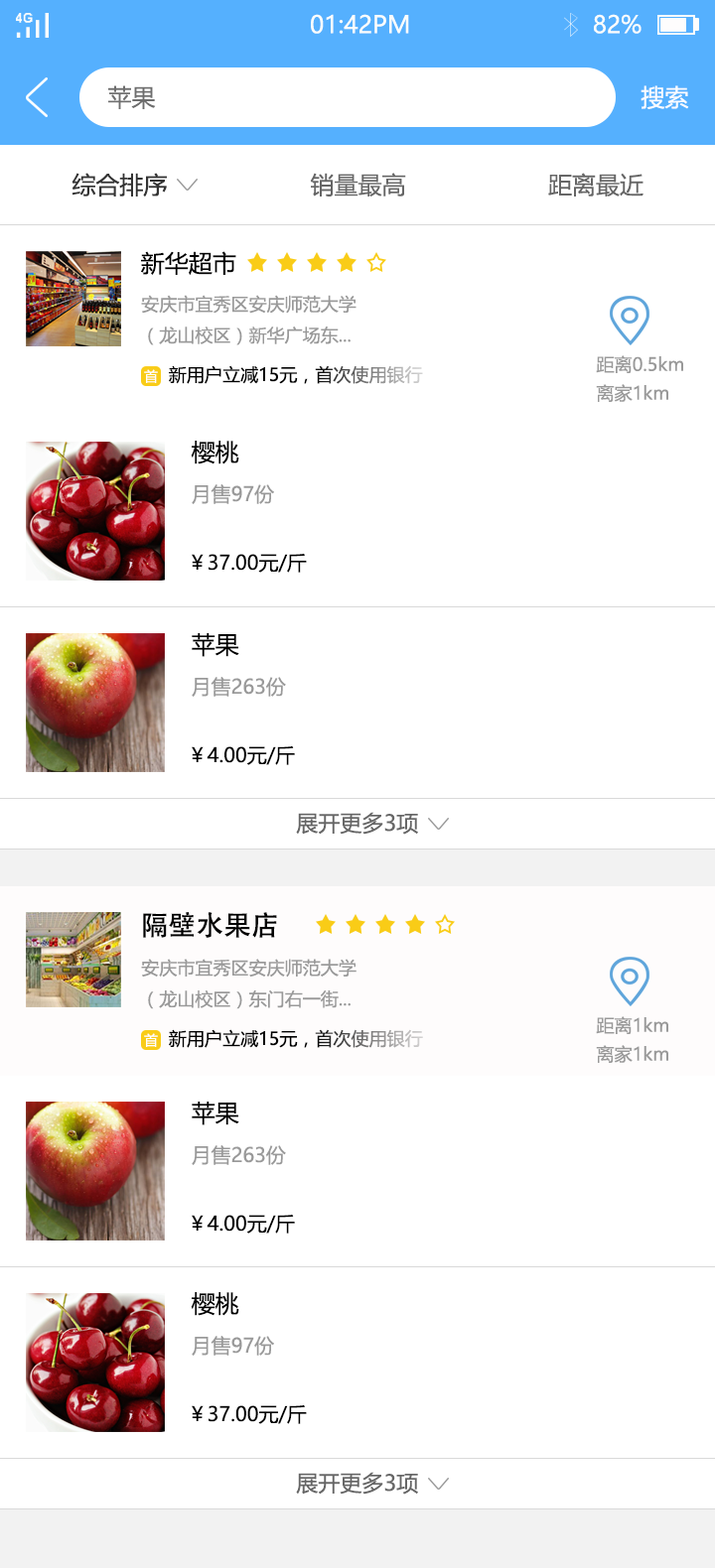
<style>
.page{position:relative;width:715px;height:1568px;background:#ffffff}
.page>*{position:absolute;margin:0}
.t1{font:23.8px "MicrosoftYaHei";color:#fbfdfc}
.t2{font:23.8px "MicrosoftYaHei";color:#666666}
.t3{font:23.8px "MicrosoftYaHei";color:#ffffff}
.t4{font:23.8px "MicrosoftYaHei";color:#333333}
.t5{font:23.8px "MicrosoftYaHei";color:#000000}
.t6{font:17.8px "MicrosoftYaHei";color:#999999}
.t7{font:17.8px "MicrosoftYaHei"}
.t8{font:17.9px "MicrosoftYaHei";color:#999999}
.t9{font:13.7px "MicrosoftYaHei";color:#ffffff}
.t10{font:19.8px "MicrosoftYaHei";color:#999999}
.t11{font:19.8px "MicrosoftYaHei";color:#000000}
.t12{font:21.8px "MicrosoftYaHei";color:#666666}
.t13{font:27.5px "AdobeHeitiStd-Regular";color:#000000}
.t14{font:17.9px "MicrosoftYaHei"}
</style>
<div class="page">
<p class="t1" style="left:311px;top:14px;width:98px;height:20px">01:42PM</p>
<p class="t1" style="left:593px;top:14px;width:48px;height:20px">82%</p>
<p class="t2" style="left:108px;top:85px;width:48px;height:24px;opacity:0.96">苹果</p>
<p class="t3" style="left:640px;top:85px;width:49px;height:24px;opacity:0.96">搜索</p>
<p class="t4" style="left:71px;top:173px;width:96px;height:24px">综合排序</p>
<p class="t2" style="left:310px;top:173px;width:96px;height:23px">销量最高</p>
<p class="t2" style="left:548px;top:173px;width:95px;height:23px">距离最近</p>
<p class="t5" style="left:141px;top:251px;width:95px;height:24px">新华超市</p>
<p class="t6" style="left:141px;top:295px;width:215px;height:50px">安庆市宜秀区安庆师范大学<br>（龙山校区）新华广场东...</p>
<p class="t7" style="left:169px;top:365px;width:254px;height:19px">新用户立减15元，首次使用银行</p>
<p class="t8" style="left:595px;top:355px;width:88px;height:18px">距离0.5km</p>
<p class="t9" style="left:144px;top:369px;width:14px;height:14px">首</p>
<p class="t8" style="left:595px;top:384px;width:73px;height:18px">离家1km</p>
<p class="t5" style="left:191px;top:441px;width:48px;height:23px">樱桃</p>
<p class="t10" style="left:192px;top:484px;width:82px;height:20px">月售97份</p>
<p class="t11" style="left:192px;top:554px;width:115px;height:19px">￥37.00元/斤</p>
<p class="t5" style="left:192px;top:633px;width:47px;height:24px">苹果</p>
<p class="t10" style="left:192px;top:677px;width:94px;height:20px">月售263份</p>
<p class="t11" style="left:192px;top:746px;width:103px;height:19px">￥4.00元/斤</p>
<p class="t12" style="left:296px;top:812px;width:122px;height:23px">展开更多3项</p>
<p class="t13" style="left:143px;top:912px;width:134px;height:26px">隔壁水果店</p>
<p class="t8" style="left:141px;top:959px;width:215px;height:50px">安庆市宜秀区安庆师范大学<br>（龙山校区）东门右一街...</p>
<p class="t8" style="left:595px;top:1016px;width:73px;height:18px">距离1km</p>
<p class="t9" style="left:144px;top:1033px;width:14px;height:14px">首</p>
<p class="t14" style="left:169px;top:1029px;width:254px;height:19px">新用户立减15元，首次使用银行</p>
<p class="t8" style="left:595px;top:1045px;width:73px;height:18px">离家1km</p>
<p class="t5" style="left:192px;top:1102px;width:47px;height:23px">苹果</p>
<p class="t10" style="left:192px;top:1145px;width:94px;height:20px">月售263份</p>
<p class="t11" style="left:192px;top:1215px;width:103px;height:19px">￥4.00元/斤</p>
<p class="t5" style="left:191px;top:1292px;width:48px;height:24px">樱桃</p>
<p class="t10" style="left:192px;top:1336px;width:82px;height:20px">月售97份</p>
<p class="t11" style="left:192px;top:1405px;width:115px;height:19px">￥37.00元/斤</p>
<p class="t12" style="left:296px;top:1472px;width:122px;height:23px">展开更多3项</p>
</div>
